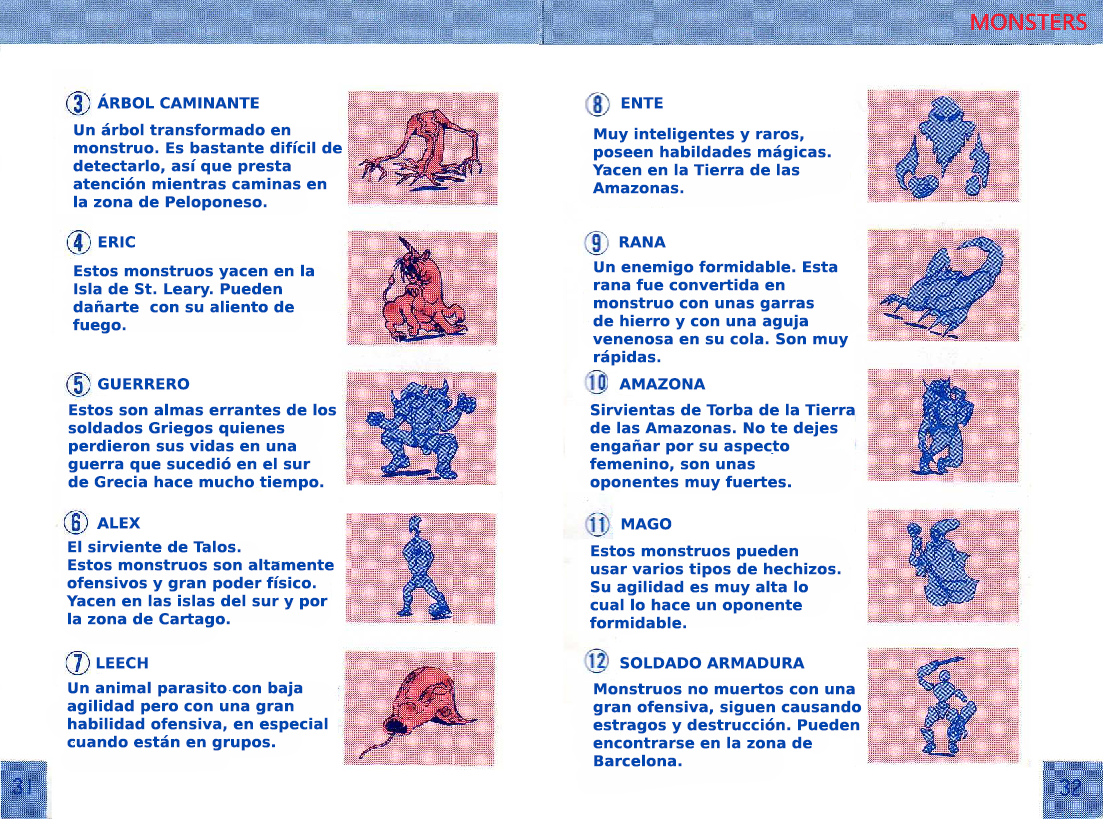
<style>
.page{position:relative;width:1103px;height:819px;background:#ffffff}
.page>*{position:absolute;margin:0}
.t1{font:15px "PrimaSansBT-Bold";color:#0247af}
</style>
<div class="page">
<p class="t1" style="left:97px;top:93px;width:162px;height:16px">ÁRBOL CAMINANTE</p>
<p class="t1" style="left:621px;top:97px;width:42px;height:12px">ENTE</p>
<p class="t1" style="left:73px;top:123px;width:269px;height:88px">Un árbol transformado en <br>monstruo. Es bastante difícil de detectarlo, así que presta <br>atención mientras caminas en <br>la zona de Peloponeso.</p>
<p class="t1" style="left:592px;top:127px;width:239px;height:67px">Muy inteligentes y raros,<br>poseen habildades mágicas.<br>Yacen en la Tierra de las <br>Amazonas.</p>
<p class="t1" style="left:98px;top:236px;width:37px;height:12px">ERIC</p>
<p class="t1" style="left:619px;top:236px;width:47px;height:12px">RANA</p>
<p class="t1" style="left:73px;top:264px;width:241px;height:70px">Estos monstruos yacen en la <br>Isla de St. Leary. Pueden <br>dañarte  con su aliento de <br>fuego.</p>
<p class="t1" style="left:593px;top:260px;width:256px;height:106px">Un enemigo formidable. Esta <br>rana fue convertida en <br>monstruo con unas garras <br>de hierro y con una aguja <br>venenosa en su cola. Son muy <br>rápidas.</p>
<p class="t1" style="left:98px;top:378px;width:92px;height:12px">GUERRERO</p>
<p class="t1" style="left:619px;top:378px;width:87px;height:12px">AMAZONA</p>
<p class="t1" style="left:68px;top:403px;width:269px;height:88px">Estos son almas errantes de los soldados Griegos quienes <br>perdieron sus vidas en una <br>guerra que sucedió en el sur <br>de Grecia hace mucho tiempo.</p>
<p class="t1" style="left:590px;top:403px;width:265px;height:88px">Sirvientas de Torba de la Tierra <br>de las Amazonas. No te dejes <br>engañar por su aspecto <br>femenino, son unas<br>oponentes muy fuertes.</p>
<p class="t1" style="left:97px;top:517px;width:44px;height:12px">ALEX</p>
<p class="t1" style="left:621px;top:518px;width:51px;height:12px">MAGO</p>
<p class="t1" style="left:66px;top:540px;width:268px;height:88px">El sirviente de Talos.<br>Estos monstruos son altamente ofensivos y gran poder físico.<br>Yacen en las islas del sur y por<br>la zona de Cartago.</p>
<p class="t1" style="left:590px;top:544px;width:251px;height:85px">Estos monstruos pueden<br>usar varios tipos de hechizos.<br>Su agilidad es muy alta lo <br>cual lo hace un oponente<br>formidable.</p>
<p class="t1" style="left:96px;top:657px;width:52px;height:12px">LEECH</p>
<p class="t1" style="left:620px;top:657px;width:185px;height:12px">SOLDADO ARMADURA</p>
<p class="t1" style="left:67px;top:681px;width:261px;height:70px">Un animal parasito con baja <br>agilidad pero con una gran <br>habilidad ofensiva, en especial <br>cuando están en grupos.</p>
<p class="t1" style="left:593px;top:683px;width:269px;height:84px">Monstruos no muertos con una <br>gran ofensiva, siguen causando estragos y destrucción. Pueden encontrarse en la zona de <br>Barcelona.</p>
</div>
